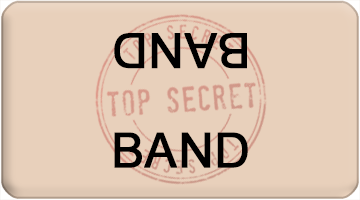
<style>
.page{position:relative;width:360px;height:200px;background:#e8d0bb}
.page>*{position:absolute;margin:0}
.t1{font:48px "ArialMT";color:#000000;font-weight:bold}
</style>
<div class="page">
<p class="t1" style="left:114px;top:33px;width:133px;height:36px;rotate:180deg">BAND</p>
<p class="t1" style="left:114px;top:132px;width:134px;height:36px">BAND</p>
</div>
